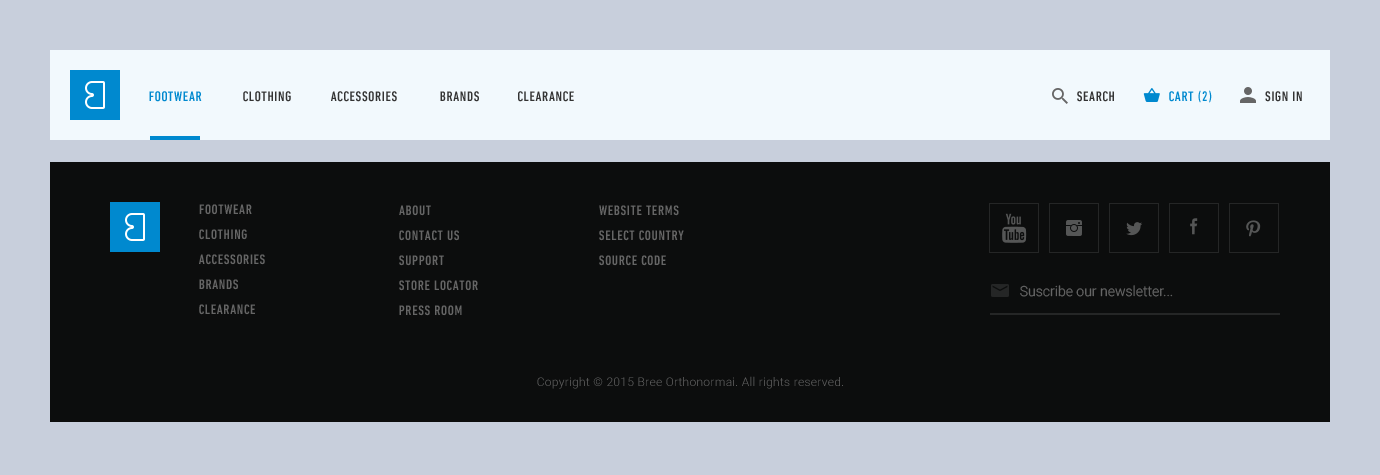
<style>
.page{position:relative;width:1380px;height:475px;background:#0c0d0d}
.page>*{position:absolute;margin:0}
.t1{font:14px "DINNextLTPro-MediumCond";letter-spacing:0.05em;color:#0089cf;text-transform:uppercase}
.t2{font:14px "DINNextLTPro-MediumCond";letter-spacing:0.05em;color:#333333;text-transform:uppercase}
.t3{font:14px/25px "DINNextLTPro-MediumCond";letter-spacing:0.05em;color:#666666;text-transform:uppercase}
.t4{font:14px "Roboto-Light";color:#666666}
.t5{font:12px "Roboto-Light";letter-spacing:0.025em;color:#666666}
</style>
<div class="page">
<p class="t1" style="left:149px;top:91px;width:53px;height:11px">Footwear</p>
<p class="t2" style="left:243px;top:91px;width:48px;height:11px">Clothing</p>
<p class="t2" style="left:331px;top:91px;width:66px;height:11px">Accessories</p>
<p class="t2" style="left:440px;top:91px;width:39px;height:11px">Brands</p>
<p class="t2" style="left:518px;top:91px;width:56px;height:11px">Clearance</p>
<p class="t2" style="left:1077px;top:91px;width:37px;height:11px">Search</p>
<p class="t1" style="left:1169px;top:90px;width:43px;height:13px">Cart (2)</p>
<p class="t2" style="left:1265px;top:91px;width:37px;height:11px">Sign in</p>
<p class="t3" style="left:199px;top:204px;width:66px;height:111px">Footwear<br>clothing<br>accessories<br>brands<br>clearance</p>
<p class="t3" style="left:399px;top:205px;width:79px;height:111px">About<br>Contact us<br>Support<br>Store locator<br>Press room</p>
<p class="t3" style="left:599px;top:205px;width:85px;height:61px">Website Terms<br>Select Country<br>Source Code</p>
<p class="t4" style="left:1020px;top:285px;width:153px;height:12px">Suscribe our newsletter...</p>
<p class="t5" style="left:537px;top:376px;width:306px;height:13px">Copyright © 2015 Bree Orthonormai. All rights reserved.</p>
</div>
